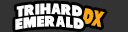
<style>
.page{position:relative;width:128px;height:32px;background:#333333}
.page>*{position:absolute;margin:0}
.t1{font:15.2px/12.4px "Tondu-Beta";letter-spacing:0.025em;color:#ffffff}
.t2{font:21.8px "Tondu-Beta";letter-spacing:-0.025em;color:#ffa800;scale:0.67 1}
</style>
<div class="page">
<p class="t1" style="left:15px;top:3px;width:69px;height:27px;text-align:center">TRIHARD<br>EMERALD</p>
<p class="t2" style="left:81px;top:8px;width:24px;height:20px;rotate:12deg">DX</p>
</div>
